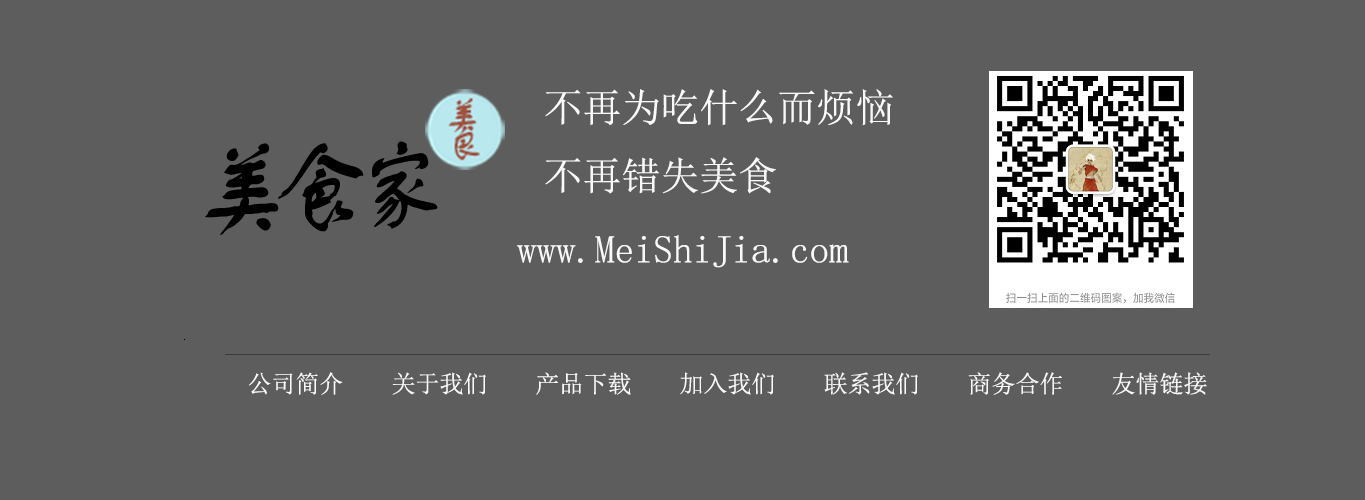
<style>
.page{position:relative;width:1365px;height:500px;background:#5d5d5d}
.page>*{position:absolute;margin:0}
.t1{font:39px "NSimSun";color:#f9f9f9}
.t2{font:24px "NSimSun";color:#f9f9f9}
</style>
<div class="page">
<p class="t1" style="left:545px;top:89px;width:348px;height:105px">不再为吃什么而烦恼<br>不再错失美食</p>
<p class="t1" style="left:517px;top:235px;width:332px;height:33px">www.MeiShiJia.com</p>
<p class="t2" style="left:249px;top:372px;width:958px;height:23px">公司简介    关于我们    产品下载    加入我们    联系我们    商务合作    友情链接</p>
</div>
